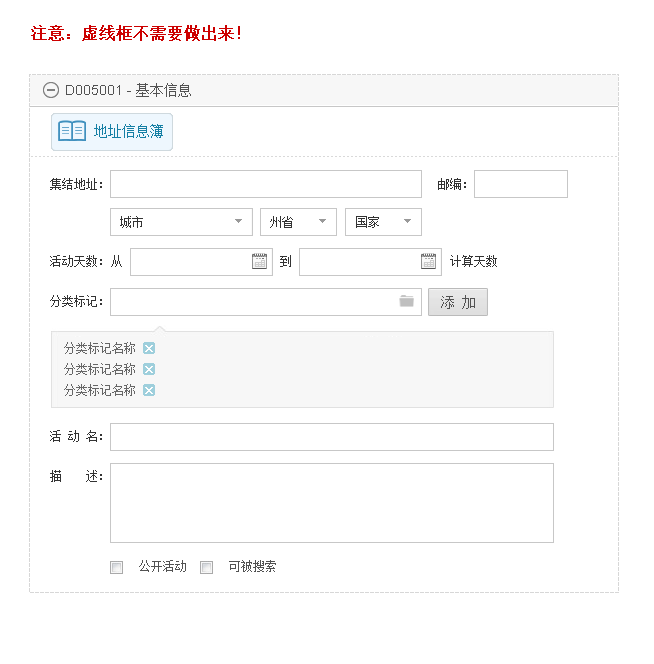
<style>
.page{position:relative;width:654px;height:664px;background:#ffffff}
.page>*{position:absolute;margin:0}
.t1{font:16px "SimSun";color:#cc0000;font-weight:bold}
.t2{font:14px "ArialMT";color:#525252}
.t3{font:14px "SimSun";color:#525252}
.t4{font:14px "SimSun";color:#147fa5}
.t5{font:12px "SimSun";color:#333333}
.t6{font:12px/21px "SimSun";color:#666666}
.t7{font:12px "SimSun";color:#525252}
</style>
<div class="page">
<p class="t1" style="left:31px;top:25px;width:209px;height:16px">注意：虚线框不需要做出来！</p>
<p class="t2" style="left:66px;top:83px;width:125px;height:14px">D005001 - <span class="t3">基本信息</span></p>
<p class="t4" style="left:94px;top:124px;width:69px;height:14px">地址信息簿</p>
<p class="t5" style="left:50px;top:178px;width:52px;height:12px">集结地址：</p>
<p class="t5" style="left:438px;top:178px;width:28px;height:12px">邮编：</p>
<p class="t5" style="left:120px;top:216px;width:23px;height:12px">城市</p>
<p class="t5" style="left:270px;top:216px;width:23px;height:12px">州省</p>
<p class="t5" style="left:356px;top:216px;width:23px;height:12px">国家</p>
<p class="t5" style="left:50px;top:255px;width:52px;height:12px">活动天数：</p>
<p class="t5" style="left:111px;top:255px;width:11px;height:12px">从</p>
<p class="t5" style="left:280px;top:255px;width:11px;height:12px">到</p>
<p class="t5" style="left:450px;top:255px;width:47px;height:12px">计算天数</p>
<p class="t5" style="left:50px;top:295px;width:52px;height:12px">分类标记：</p>
<p class="t6" style="left:64px;top:342px;width:71px;height:54px">分类标记名称<br>分类标记名称<br>分类标记名称</p>
<p class="t5" style="left:50px;top:430px;width:52px;height:12px">活 动 名：</p>
<p class="t5" style="left:50px;top:470px;width:52px;height:12px">描    述：</p>
<p class="t7" style="left:139px;top:560px;width:47px;height:12px">公开活动</p>
<p class="t7" style="left:229px;top:560px;width:47px;height:12px">可被搜索</p>
</div>
